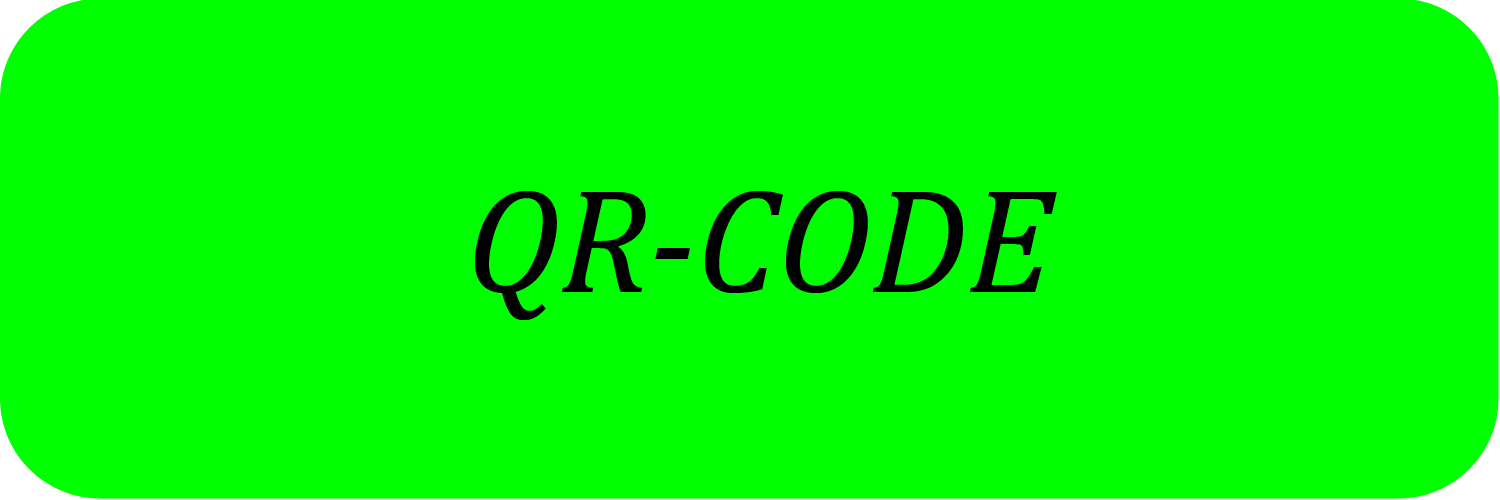
<style>
.page{position:relative;width:1500px;height:500px;background:#00ff00}
.page>*{position:absolute;margin:0}
.t1{font:150px "Cambria-Italic";color:#000000}
</style>
<div class="page">
<p class="t1" style="left:475px;top:191px;width:582px;height:129px">QR-CODE</p>
</div>
